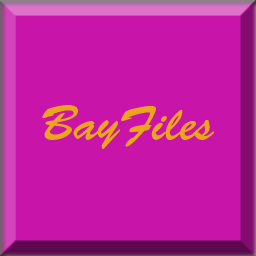
<style>
.page{position:relative;width:256px;height:256px;background:#c814a8}
.page>*{position:absolute;margin:0}
.t1{font:48px "BrushScriptStd";color:#eaa41d}
</style>
<div class="page">
<p class="t1" style="left:42px;top:105px;width:173px;height:44px">BayFiles</p>
</div>
